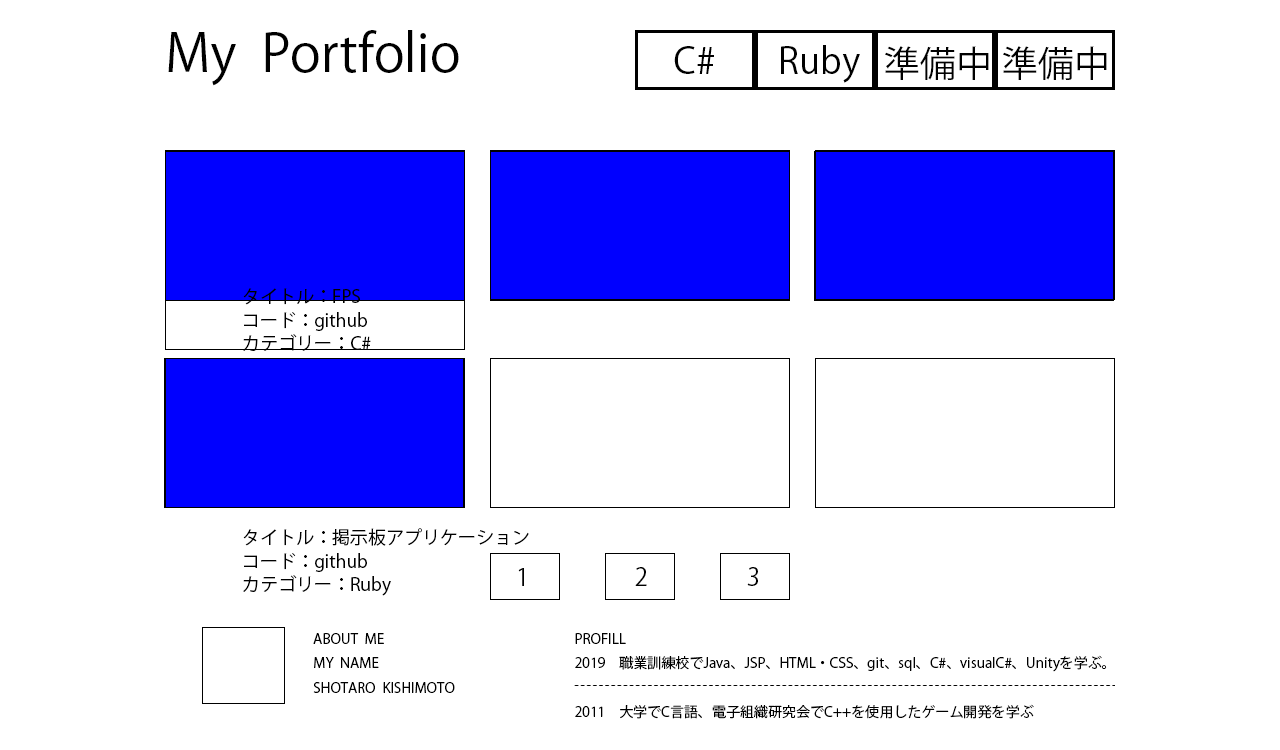
<style>
.page{position:relative;width:1280px;height:750px;background:#ffffff}
.page>*{position:absolute;margin:0}
.t1{font:52px "KozGoPr6N-Regular";color:#000000}
.t2{font:36px "KozGoPr6N-Regular";color:#000000}
.t3{font:18px "KozGoPr6N-Regular";color:#000000}
.t4{font:24px "KozGoPr6N-Regular";color:#000000}
.t5{font:14px "KozGoPr6N-Regular";color:#000000}
</style>
<div class="page">
<p class="t1" style="left:168px;top:30px;width:291px;height:56px">My  Portfolio</p>
<p class="t2" style="left:674px;top:46px;width:40px;height:28px">C#</p>
<p class="t2" style="left:781px;top:45px;width:79px;height:38px">Ruby</p>
<p class="t2" style="left:885px;top:46px;width:104px;height:34px">準備中</p>
<p class="t2" style="left:1003px;top:46px;width:104px;height:34px">準備中</p>
<p class="t3" style="left:243px;top:288px;width:128px;height:63px">タイトル：FPS<br>コード：github<br>カテゴリー：C#</p>
<p class="t3" style="left:243px;top:528px;width:286px;height:68px">タイトル：掲示板アプリケーション<br>コード：github<br>カテゴリー：Ruby</p>
<p class="t4" style="left:518px;top:568px;width:6px;height:18px">1</p>
<p class="t4" style="left:635px;top:567px;width:12px;height:19px">2</p>
<p class="t4" style="left:747px;top:567px;width:11px;height:19px">3</p>
<p class="t5" style="left:313px;top:633px;width:142px;height:60px">ABOUT  ME<br>MY  NAME<br>SHOTARO  KISHIMOTO</p>
<p class="t5" style="left:575px;top:633px;width:532px;height:86px">PROFILL<br>2019　職業訓練校でJava、JSP、HTML・CSS、git、sql、C#、visualC#、Unityを学ぶ。<br><br>2011　大学でC言語、電子組織研究会でC++を使用したゲーム開発を学ぶ</p>
</div>
